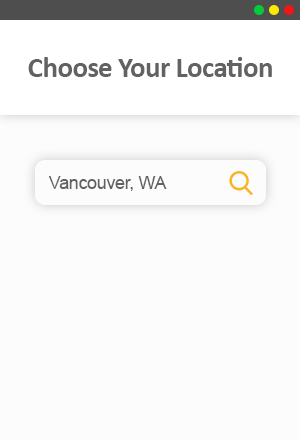
<style>
.page{position:relative;width:300px;height:440px;background:#fcfcfc}
.page>*{position:absolute;margin:0}
.t1{font:29.2px "Calibri-Bold";letter-spacing:-0.025em;color:#626262}
.t2{font:18.2px "ArialMT";letter-spacing:-0.025em;color:#626262}
</style>
<div class="page">
<p class="t1" style="left:28px;top:57px;width:244px;height:20px">Choose Your Location</p>
<p class="t2" style="left:48px;top:176px;width:119px;height:15px">Vancouver, WA</p>
</div>
